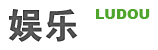
<style>
.page{position:relative;width:158px;height:50px;background:#ffffff}
.page>*{position:absolute;margin:0}
.t1{font:36px "Jdahei";color:#5e5e5e}
.t2{font:14px "Arial-Black";color:#4fa52b}
</style>
<div class="page">
<p class="t1" style="left:8px;top:9px;width:70px;height:33px">娱乐</p>
<p class="t2" style="left:96px;top:9px;width:54px;height:10px">LUDOU</p>
</div>
